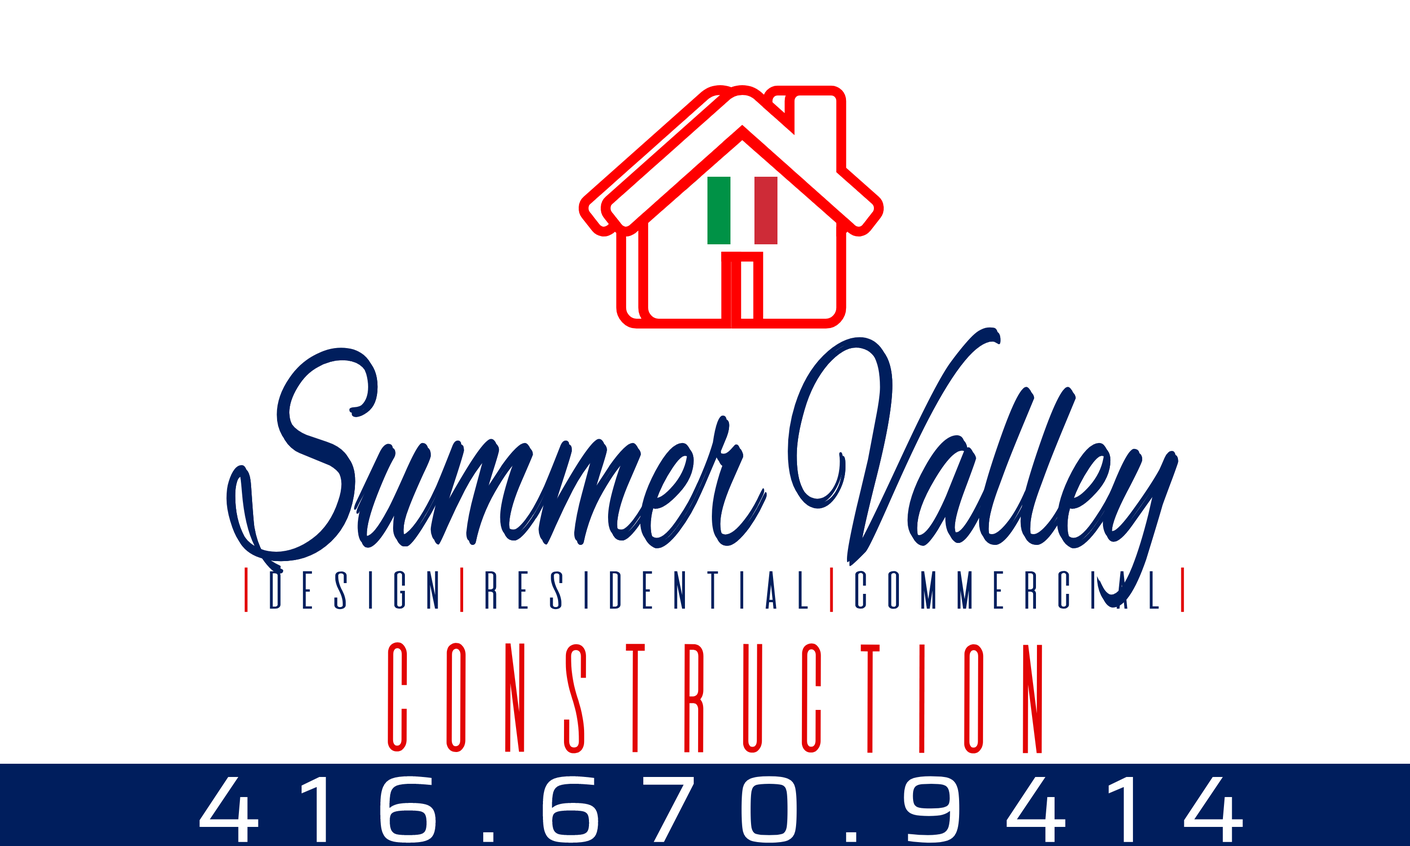
<style>
.page{position:relative;width:1410px;height:846px;background:#ffffff}
.page>*{position:absolute;margin:0}
.t1{font:308.1px "AlexBrush-Regular";color:#001e5d;scale:0.55 1}
.t2{font:46.7px "DeValencia-Regular";color:#001e5d;scale:1.2 1}
.t3{font:46.7px "DeValencia-Regular";color:#e20404;scale:1.2 1}
.t4{font:135.1px "DeValencia-Regular";color:#e20404;scale:0.74 1}
.t5{font:94.4px "Saira-Regular";letter-spacing:0.324em;color:#ffffff;scale:1.13 1}
</style>
<div class="page">
<p class="t1" style="left:226px;top:327px;width:950px;height:277px">Summer Valley</p>
<p class="t1" style="left:229px;top:331px;width:949px;height:276px">Summer Valley</p>
<p class="t1" style="left:229px;top:331px;width:949px;height:276px">Summer Valley</p>
<p class="t2" style="left:244px;top:567px;width:940px;height:45px"><span class="t3">|</span>Design<span class="t3">|</span>Residential<span class="t3">|</span>Commercial<span class="t3">|</span></p>
<p class="t4" style="left:387px;top:642px;width:655px;height:111px">Construction</p>
<p class="t5" style="left:199px;top:776px;width:1044px;height:67px">416.670.9414</p>
</div>
